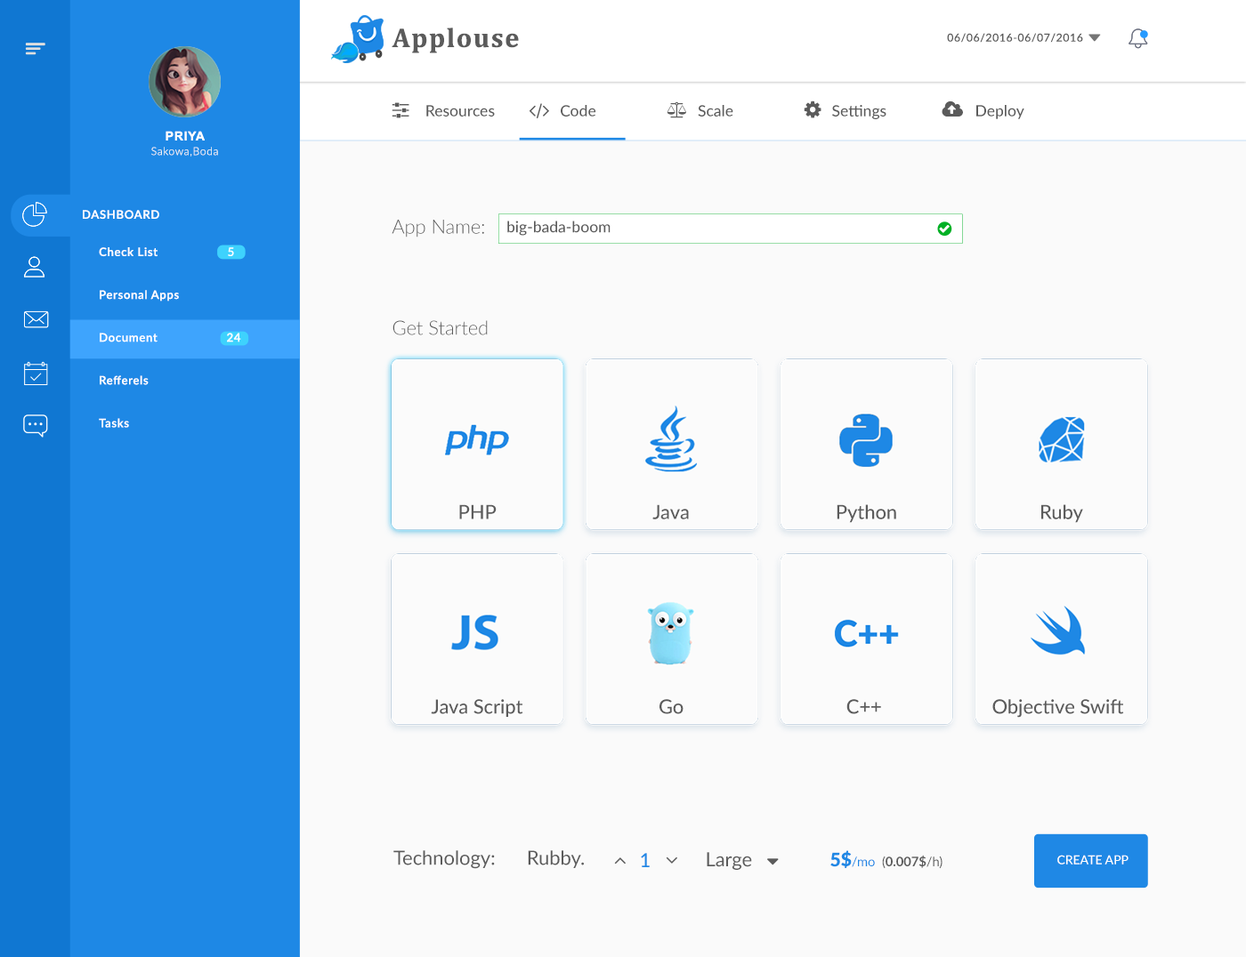
<style>
.page{position:relative;width:1246px;height:957px;background:#fafafa}
.page>*{position:absolute;margin:0}
.t1{font:27.2px "Cambria-Bold";letter-spacing:0.05em;color:#5b5b5b}
.t2{font:10.9px "Lato-Regular";letter-spacing:0.05em;color:#5b5b5b}
.t3{font:15.6px "Lato-Medium";color:#5b5b5b}
.t4{font:15.6px "Lato-Medium";color:#5b5b5b;text-transform:uppercase}
.t5{font:12.5px "Arial-BoldMT";letter-spacing:0.05em;color:#ffffff;text-transform:uppercase}
.t6{font:10.9px "Lato-Light";letter-spacing:0.05em;color:#f3f4f4}
.t7{font:11.7px "Lato-Semibold";letter-spacing:0.05em;color:#ffffff;text-transform:uppercase}
.t8{font:19.5px "Lato-Light";color:#5b5b5b}
.t9{font:19.5px "Lato-Light";color:#5b5b5b;text-transform:uppercase}
.t10{font:11.7px/8.6px "Lato-Semibold";letter-spacing:0.05em;color:#ffffff}
.t11{font:11.7px "Lato-Medium";letter-spacing:0.05em;color:#ffffff}
.t12{font:11.7px "Lato-Semibold";letter-spacing:0.05em;color:#ffffff}
.t13{font:19.5px "Lato-Medium";color:#5b5b5b}
.t14{font:19.5px "Lato-Regular";color:#5b5b5b}
.t15{font:19.5px "Lato-Medium";color:#1e88e5}
.t16{font:13px "Lato-Bold";color:#5b5b5b}
.t17{font:18.6px "Lato-Black";color:#1e88e5;text-transform:uppercase}
.t18{font:13px "Lato-Regular";color:#1e88e5;text-transform:uppercase}
.t19{font:13px "Lato-Regular";color:#1e88e5}
.t20{font:13px "Lato-Regular";color:#5b5b5b}
.t21{font:12.5px "Lato-Medium";color:#ffffff;text-transform:uppercase}
</style>
<div class="page">
<p class="t1" style="left:391px;top:28px;width:128px;height:25px">Applouse</p>
<p class="t2" style="left:947px;top:33px;width:136px;height:10px">06/06/2016-06/07/2016</p>
<p class="t3" style="left:426px;top:105px;width:69px;height:12px"><span class="t4">R</span>esources</p>
<p class="t3" style="left:561px;top:105px;width:35px;height:12px">Code</p>
<p class="t3" style="left:698px;top:105px;width:35px;height:12px">Scale</p>
<p class="t3" style="left:832px;top:105px;width:54px;height:14px"><span class="t4">s</span>ettings</p>
<p class="t3" style="left:976px;top:105px;width:48px;height:14px">Deploy</p>
<p class="t5" style="left:165px;top:131px;width:40px;height:10px">priya</p>
<p class="t6" style="left:151px;top:147px;width:67px;height:10px">Sakowa,Boda</p>
<p class="t7" style="left:83px;top:210px;width:76px;height:10px">Dashboard</p>
<p class="t8" style="left:391px;top:220px;width:93px;height:18px"><span class="t9">A</span>pp Name:</p>
<p class="t3" style="left:507px;top:221px;width:103px;height:15px">big-bada-boom</p>
<p class="t10" style="left:99px;top:247px;width:80px;height:181px">Check List<br><br><br><br><br>Personal Apps<br><br><br><br><br>Document<br><br><br><br><br>Refferels<br><br><br><br><br>Tasks</p>
<p class="t11" style="left:228px;top:247px;width:6px;height:9px">5</p>
<p class="t8" style="left:392px;top:320px;width:96px;height:15px">Get Started</p>
<p class="t12" style="left:227px;top:333px;width:14px;height:10px">24</p>
<p class="t13" style="left:459px;top:504px;width:37px;height:16px">PHP</p>
<p class="t13" style="left:652px;top:504px;width:37px;height:16px">Java</p>
<p class="t13" style="left:836px;top:504px;width:60px;height:19px">Python</p>
<p class="t13" style="left:1041px;top:504px;width:42px;height:19px">Ruby</p>
<p class="t13" style="left:431px;top:699px;width:92px;height:18px">Java Script</p>
<p class="t13" style="left:659px;top:699px;width:24px;height:15px">Go</p>
<p class="t13" style="left:846px;top:699px;width:35px;height:15px">C++</p>
<p class="t13" style="left:992px;top:699px;width:132px;height:19px">Objective Swift</p>
<p class="t14" style="left:393px;top:851px;width:191px;height:18px">Technology:      Rubby.</p>
<p class="t15" style="left:641px;top:853px;width:8px;height:14px">1</p>
<p class="t14" style="left:706px;top:852px;width:46px;height:18px">Large</p>
<p class="t16" style="left:830px;top:851px;width:112px;height:18px"><span class="t17">5$</span><span class="t18">/</span><span class="t19">mo</span><span class="t20">  (</span>0.007$<span class="t20">/h)</span></p>
<p class="t21" style="left:1057px;top:855px;width:71px;height:10px">Create App</p>
</div>
